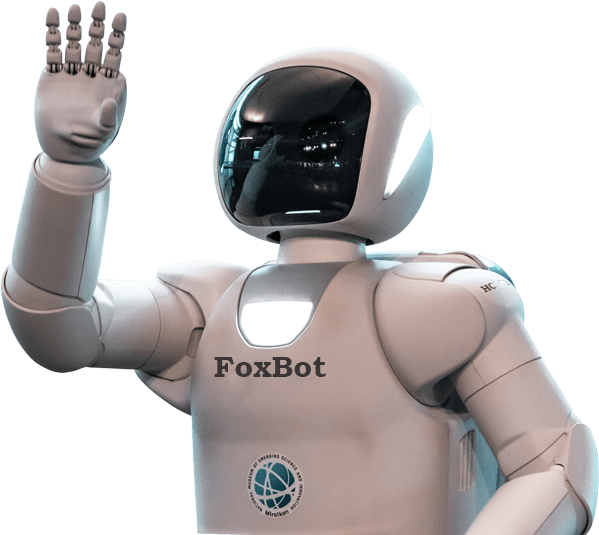
<style>
.page{position:relative;width:599px;height:535px;background:#ffffff}
.page>*{position:absolute;margin:0}
.t1{font:30px "BookmanOldStyle-Bold";letter-spacing:0.01em;color:#3a3636}
</style>
<div class="page">
<p class="t1" style="left:214px;top:357px;width:112px;height:20px">FoxBot</p>
</div>
